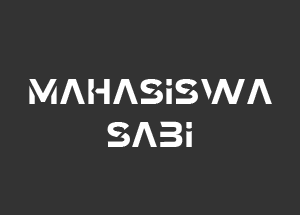
<style>
.page{position:relative;width:300px;height:215px;background:#333333}
.page>*{position:absolute;margin:0}
.t1{font:36px "TechnoSphereDemo";color:#ffffff}
</style>
<div class="page">
<p class="t1" style="left:29px;top:79px;width:243px;height:68px;text-align:center">mahasiswa<br>sabi</p>
</div>
